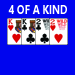
<style>
.page{position:relative;width:75px;height:75px;background:#0005ee}
.page>*{position:absolute;margin:0}
.t1{font:12.5px "SegoeUI-Bold";color:#ffffff;scale:0.8 1}
</style>
<div class="page">
<p class="t1" style="left:8px;top:5px;width:59px;height:9px">4 OF A KIND</p>
</div>
